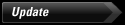
<style>
.page{position:relative;width:125px;height:25px;background:#0d0d0d}
.page>*{position:absolute;margin:0}
.t1{font:12.5px "UniversLT-CondensedBoldOblique";letter-spacing:0.015em;color:#fefefe}
</style>
<div class="page">
<p class="t1" style="left:12px;top:7px;width:37px;height:12px">Update</p>
</div>
